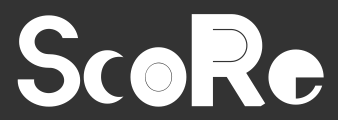
<style>
.page{position:relative;width:338px;height:120px;background:#333333}
.page>*{position:absolute;margin:0}
.t1{font:125px "pigmo-00";color:#ffffff}
</style>
<div class="page">
<p class="t1" style="left:17px;top:14px;width:307px;height:93px">ScoRe</p>
</div>
